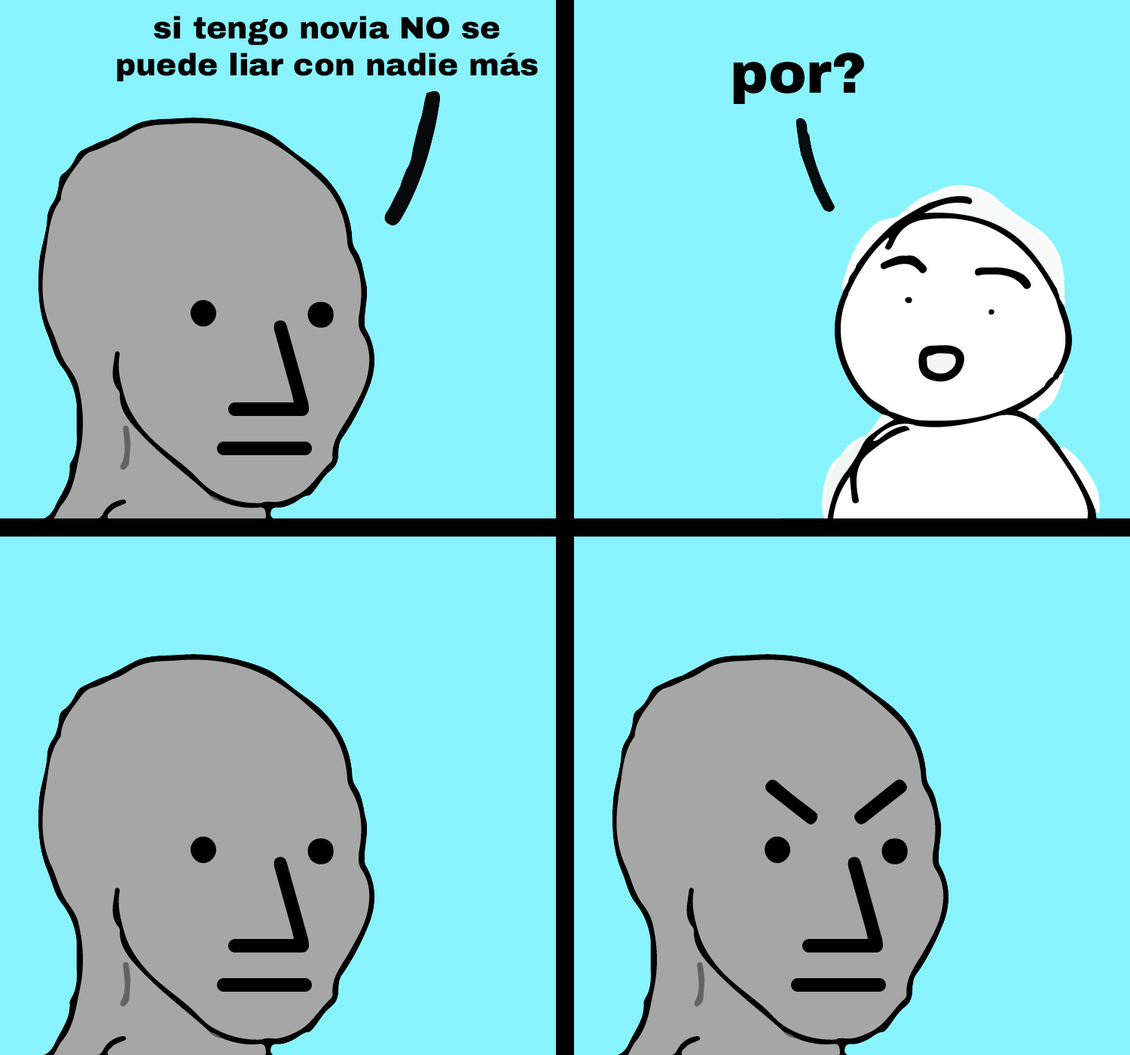
<style>
.page{position:relative;width:1130px;height:1055px;background:#88f3fd}
.page>*{position:absolute;margin:0}
.t1{font:30.9px "ArchivoBlack-Regular";color:#000000}
.t2{font:57.3px "ArchivoBlack-Regular";color:#000000}
</style>
<div class="page">
<p class="t1" style="left:117px;top:16px;width:421px;height:65px;text-align:center">si tengo novia NO se<br>puede liar con nadie más</p>
<p class="t2" style="left:733px;top:52px;width:131px;height:52px">por?</p>
</div>
